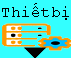
<style>
.page{position:relative;width:71px;height:58px;background:#33ffff}
.page>*{position:absolute;margin:0}
.t1{font:16px "CourierNewPSMT";color:#000000}
</style>
<div class="page">
<p class="t1" style="left:2px;top:3px;width:67px;height:17px">Thiếtbị</p>
</div>
